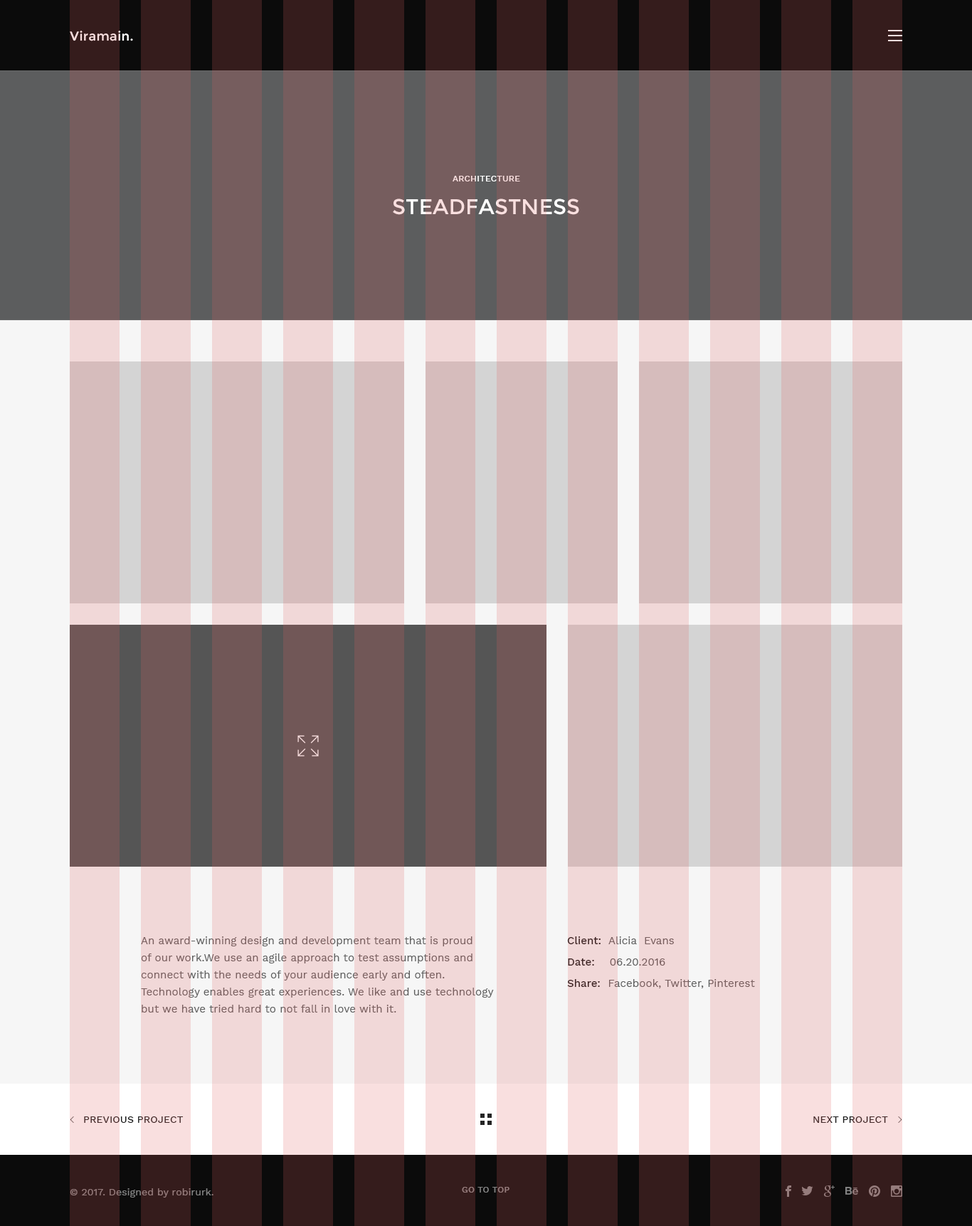
<style>
.page{position:relative;width:972px;height:1226px}
.page>*{position:absolute;margin:0}
.t1{font:12.8px "Montserrat-Regular";letter-spacing:0.025em;color:#f9dfdf}
.t2{font:8.5px "WorkSans-Medium";letter-spacing:0.025em;color:#f9dfdf;text-transform:uppercase}
.t3{font:21.4px "Montserrat-Regular";letter-spacing:0.005em;color:#f9dfdf;text-transform:uppercase}
.t4{font:10.7px/17.1px "WorkSans-Regular";letter-spacing:0.005em;color:#795f5f}
.t5{font:10.7px/21.4px "WorkSans-Regular";letter-spacing:0.005em}
.t6{font:10.7px/21.4px "WorkSans-Medium";letter-spacing:0.005em}
.t7{font:10px "WorkSans-Medium";letter-spacing:0.01em;color:#442a2a;text-transform:uppercase}
.t8{font:10px "WorkSans-Medium";letter-spacing:0.01em;text-transform:uppercase}
.t9{font:10px "WorkSans-Regular";letter-spacing:0.005em;color:#838383}
.t10{font:8.5px "WorkSans-Medium";letter-spacing:0.025em;color:#838383;text-transform:uppercase}
</style>
<div class="page">
<p class="t1" style="left:70px;top:31px;width:63px;height:10px">Viramain.</p>
<p class="t2" style="left:453px;top:176px;width:67px;height:6px">architecture</p>
<p class="t3" style="left:393px;top:199px;width:186px;height:16px">Steadfastness</p>
<p class="t4" style="left:141px;top:937px;width:353px;height:76px">An award-winning design and development team that is proud <br>of our work.We use an agile approach to test assumptions and <br>connect with the needs of your audience early and often. <br>Technology enables great experiences. We like and use technology <br>but we have tried hard to not fall in love with it.</p>
<p class="t5" style="left:567px;top:937px;width:188px;height:52px"><span class="t6">Client:  </span>Alicia  Evans<br><span class="t6">Date:    </span>06.20.2016<br><span class="t6">Share:  </span>Facebook, Twitter, Pinterest</p>
<p class="t7" style="left:84px;top:1117px;width:100px;height:6px">previous project</p>
<p class="t8" style="left:814px;top:1117px;width:74px;height:6px">next project</p>
<p class="t9" style="left:70px;top:1189px;width:144px;height:9px">© 2017. Designed by robirurk.</p>
<p class="t10" style="left:462px;top:1187px;width:48px;height:6px">go to top</p>
</div>
